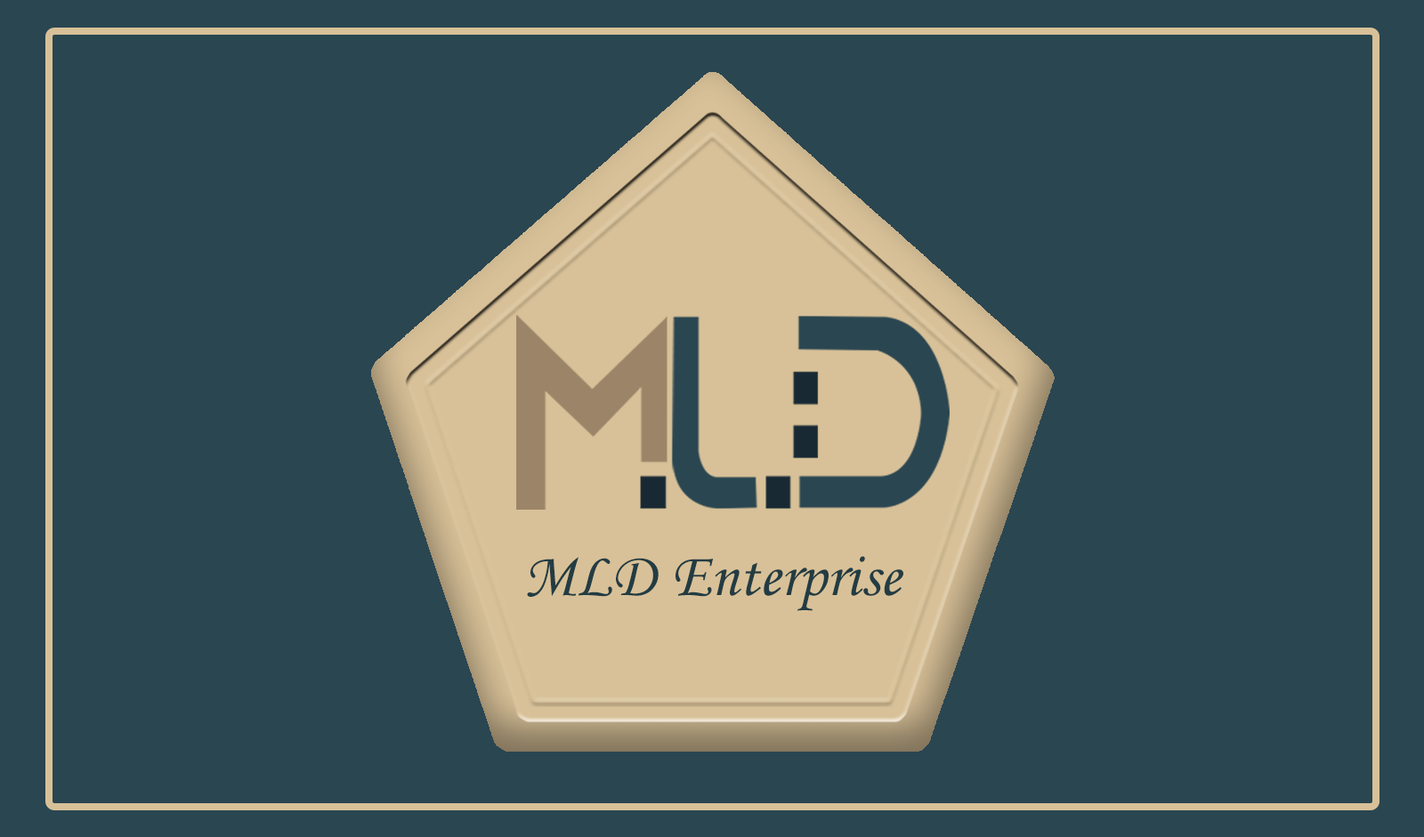
<style>
.page{position:relative;width:1424px;height:837px;background:#2a4651}
.page>*{position:absolute;margin:0}
.t1{font:62.2px "MonotypeCorsiva";color:#233c43}
</style>
<div class="page">
<p class="t1" style="left:527px;top:556px;width:376px;height:55px">MLD Enterprise</p>
</div>
